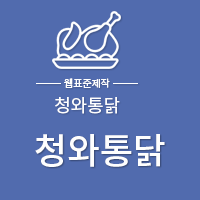
<style>
.page{position:relative;width:200px;height:200px;background:#516bae}
.page>*{position:absolute;margin:0}
.t1{font:10px "NotoSansCJKkr-Regular";color:#fefefe}
.t2{font:18px "NotoSansCJKkr-Regular";color:#fefefe}
.t3{font:36px "NotoSansCJKkr-Medium";color:#fefefe}
</style>
<div class="page">
<p class="t1" style="left:64px;top:78px;width:46px;height:10px">웹표준제작</p>
<p class="t2" style="left:55px;top:97px;width:65px;height:17px">청와통닭</p>
<p class="t3" style="left:35px;top:134px;width:130px;height:33px">청와통닭</p>
</div>
